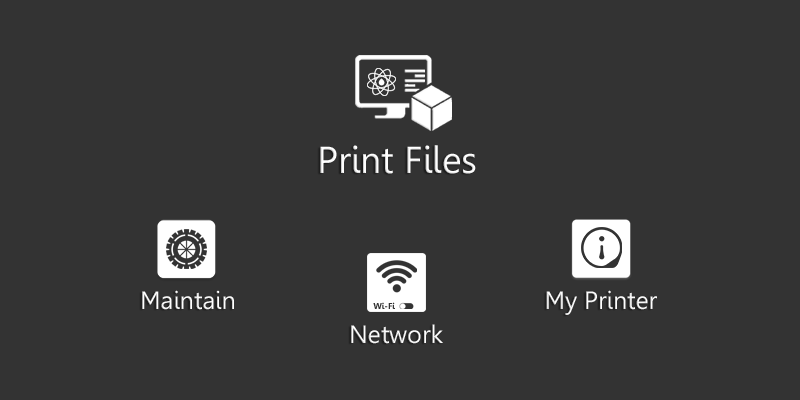
<style>
.page{position:relative;width:800px;height:400px;background:#333333}
.page>*{position:absolute;margin:0}
.t1{font:37.5px "Leelawadee";color:#ffffff}
.t2{font:25px "Leelawadee";color:#ffffff}
.t3{font:8.3px "Leelawadee-Bold";color:#333333}
</style>
<div class="page">
<p class="t1" style="left:320px;top:145px;width:156px;height:29px">Print Files</p>
<p class="t2" style="left:142px;top:290px;width:92px;height:20px">Maintain</p>
<p class="t2" style="left:546px;top:290px;width:111px;height:25px">My Printer</p>
<p class="t3" style="left:373px;top:302px;width:22px;height:7px">Wi-Fi</p>
<p class="t2" style="left:351px;top:324px;width:92px;height:20px">Network</p>
</div>
